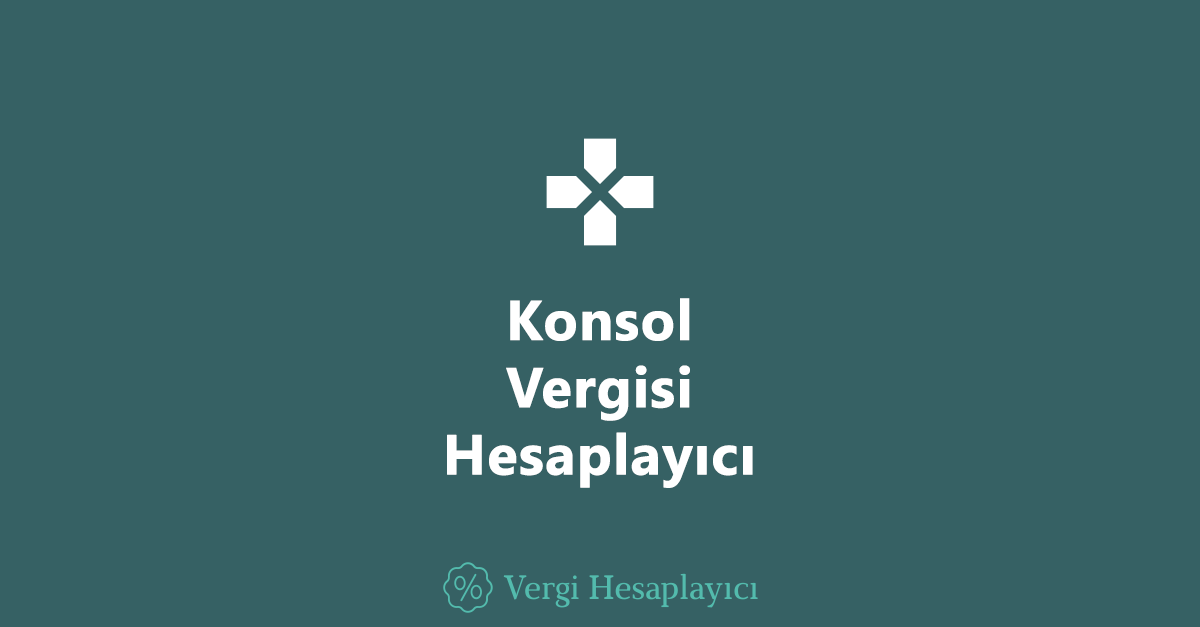
<style>
.page{position:relative;width:1200px;height:627px;background:#366164}
.page>*{position:absolute;margin:0}
.t1{font:56px "SegoeUI-Bold";color:#ffffff;font-weight:bold}
</style>
<div class="page">
<p class="t1" style="left:447px;top:298px;width:306px;height:190px;text-align:center">Konsol<br>Vergisi<br>Hesaplayıcı</p>
</div>
